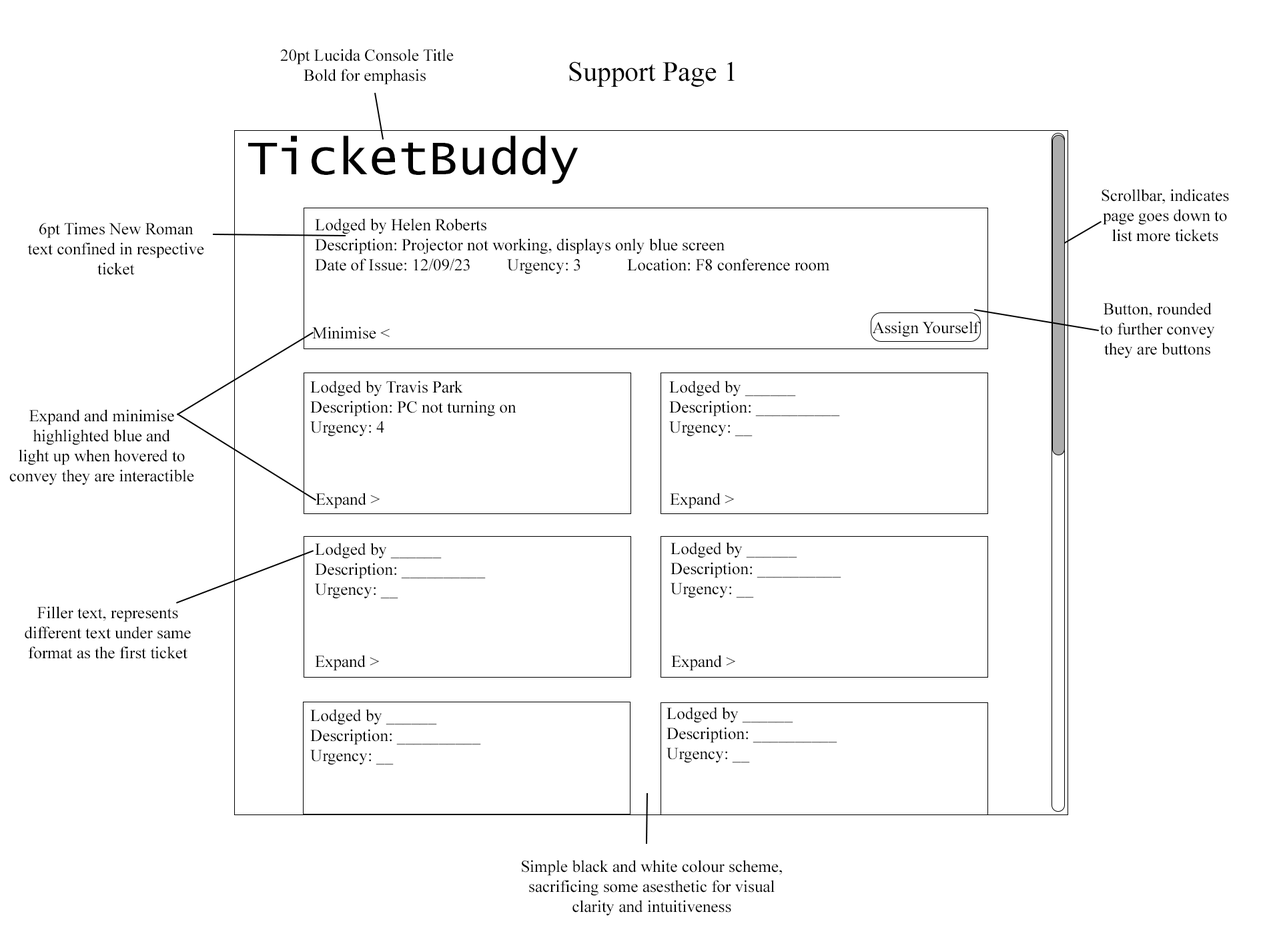
<style>
.page{position:relative;width:1261px;height:946px;background:#ffffff}
.page>*{position:absolute;margin:0}
.t1{font:16.7px "TimesNewRomanPSMT";color:#000000}
.t2{font:27.8px "TimesNewRomanPSMT";color:#000000}
.t3{font:50px "LucidaConsole";color:#000000}
</style>
<div class="page">
<p class="t1" style="left:280px;top:49px;width:174px;height:36px;text-align:center">20pt Lucida Console Title<br>Bold for emphasis</p>
<p class="t2" style="left:569px;top:61px;width:166px;height:26px">Support Page 1</p>
<p class="t3" style="left:248px;top:135px;width:331px;height:49px">TicketBuddy</p>
<p class="t1" style="left:1102px;top:189px;width:127px;height:53px;text-align:center">Scrollbar, indicates<br>page goes down to<br>list more tickets</p>
<p class="t1" style="left:315px;top:218px;width:515px;height:56px">Lodged by Helen Roberts<br>Description: Projector not working, displays only blue screen<br>Date of Issue: 12/09/23  Urgency: 3  Location: F8 conference room</p>
<p class="t1" style="left:27px;top:222px;width:177px;height:53px;text-align:center">6pt Times New Roman<br>text confined in respective<br>ticket</p>
<p class="t1" style="left:1100px;top:302px;width:115px;height:56px;text-align:center">Button, rounded<br>to further convey<br>they are buttons</p>
<p class="t1" style="left:312px;top:326px;width:78px;height:13px">Minimise &lt;</p>
<p class="t1" style="left:872px;top:321px;width:109px;height:16px">Assign Yourself</p>
<p class="t1" style="left:310px;top:380px;width:206px;height:56px">Lodged by Travis Park<br>Description: PC not turning on<br>Urgency: 4</p>
<p class="t1" style="left:669px;top:380px;width:171px;height:56px">Lodged by ______<br>Description: __________<br>Urgency: __</p>
<p class="t1" style="left:9px;top:409px;width:185px;height:76px;text-align:center">Expand and minimise<br>highlighted blue and<br>light up when hovered to<br>convey they are interactible</p>
<p class="t1" style="left:316px;top:492px;width:64px;height:16px">Expand &gt;</p>
<p class="t1" style="left:670px;top:492px;width:64px;height:16px">Expand &gt;</p>
<p class="t1" style="left:315px;top:542px;width:171px;height:57px">Lodged by ______<br>Description: __________<br>Urgency: __</p>
<p class="t1" style="left:671px;top:542px;width:170px;height:56px">Lodged by ______<br>Description: __________<br>Urgency: __</p>
<p class="t1" style="left:25px;top:606px;width:166px;height:53px;text-align:center">Filler text, represents<br>different text under same<br>format as the first ticket</p>
<p class="t1" style="left:315px;top:655px;width:64px;height:16px">Expand &gt;</p>
<p class="t1" style="left:671px;top:655px;width:64px;height:16px">Expand &gt;</p>
<p class="t1" style="left:310px;top:709px;width:171px;height:56px">Lodged by ______<br>Description: __________<br>Urgency: __</p>
<p class="t1" style="left:667px;top:707px;width:170px;height:56px">Lodged by ______<br>Description: __________<br>Urgency: __</p>
<p class="t1" style="left:522px;top:859px;width:260px;height:56px;text-align:center">Simple black and white colour scheme,<br>sacrificing some asesthetic for visual<br>clarity and intuitiveness</p>
</div>
